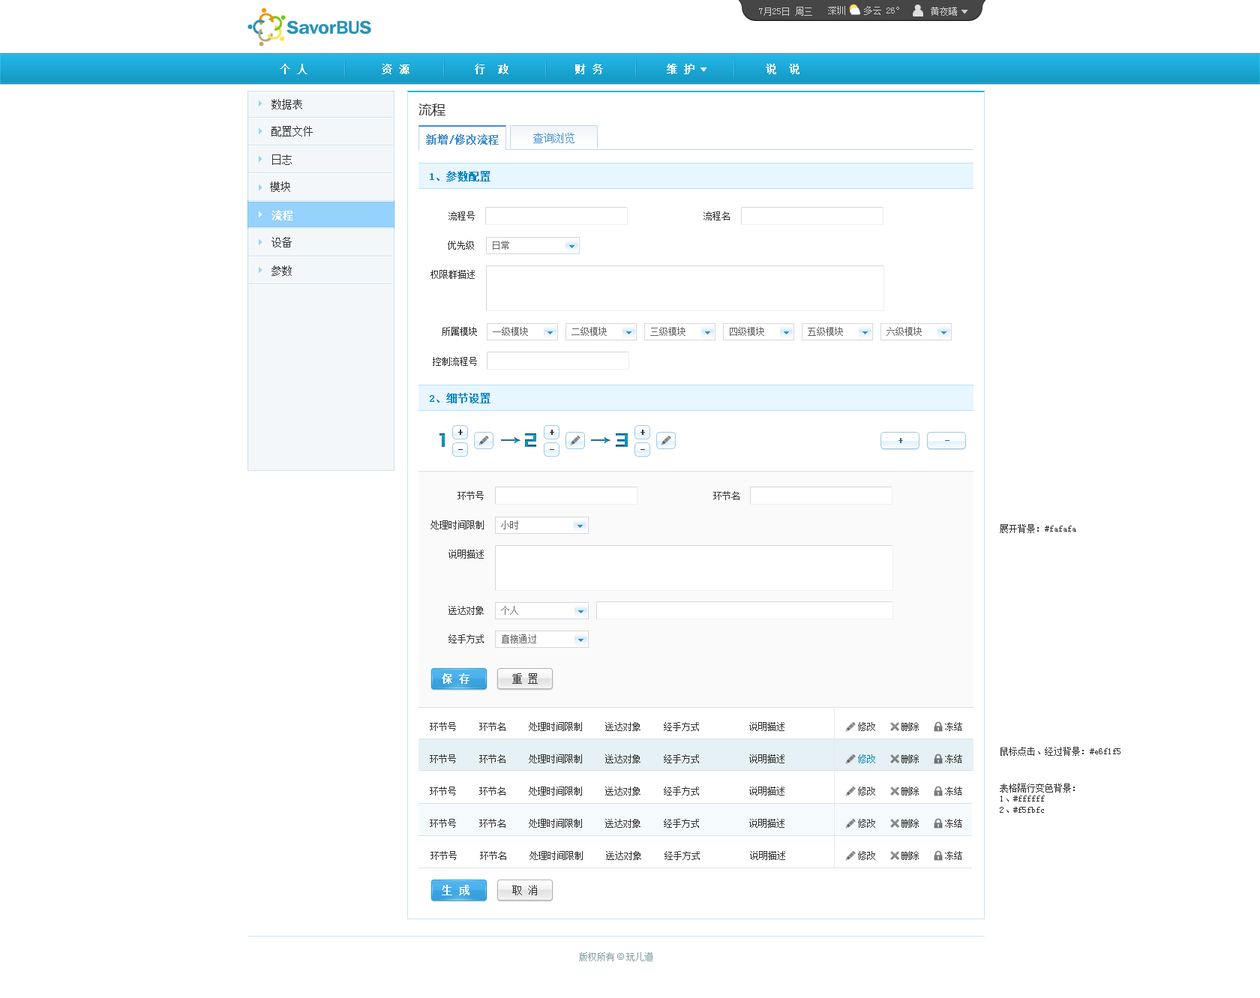
<style>
.page{position:relative;width:1260px;height:998px;background:#ffffff}
.page>*{position:absolute;margin:0}
.t1{font:9px "SimSun";color:#cccccc}
.t2{font:10.5px "SimSun";color:#ffffff;font-weight:bold}
.t3{font:10.5px "SimSun";color:#333333}
.t4{font:13.5px "MicrosoftYaHei";color:#333333}
.t5{font:10.5px "SimSun";color:#458fce;font-weight:bold}
.t6{font:10.5px "SimSun";color:#458fce}
.t7{font:10.5px "SimSun";color:#0085c5;font-weight:bold}
.t8{font:9px "SimSun";color:#333333}
.t9{font:9px "SimSun";color:#666666}
.t10{font:18px "ZHSCNMT--GBK1-0";color:#1091bb;font-weight:bold}
.t11{font:9px "SimSun";color:#333333;font-weight:bold}
.t12{font:18px "ZHSCNMT--GBK1-0";font-weight:bold}
.t13{font:9px "SimSun";color:#406580;font-weight:bold}
.t14{font:9px "SimSun";color:#0085c5}
.t15{font:9px "SimSun";color:#849fa6}
.t16{font:9px "ArialMT";color:#849fa6}
</style>
<div class="page">
<p class="t1" style="left:828px;top:6px;width:71px;height:9px">深圳    多云 26°</p>
<p class="t1" style="left:759px;top:7px;width:53px;height:9px">7月25日 周三</p>
<p class="t1" style="left:931px;top:7px;width:26px;height:9px">黄夜曦</p>
<p class="t2" style="left:280px;top:64px;width:520px;height:10px">个 人         资 源           行  政           财 务       维 护          说  说</p>
<p class="t3" style="left:272px;top:99px;width:30px;height:11px">数据表</p>
<p class="t4" style="left:418px;top:104px;width:28px;height:12px">流程</p>
<p class="t3" style="left:272px;top:126px;width:41px;height:10px">配置文件</p>
<p class="t5" style="left:426px;top:134px;width:73px;height:11px">新增/修改流程</p>
<p class="t6" style="left:533px;top:133px;width:41px;height:10px">查询浏览</p>
<p class="t3" style="left:272px;top:154px;width:20px;height:11px">日志</p>
<p class="t7" style="left:430px;top:171px;width:60px;height:11px">1、参数配置</p>
<p class="t3" style="left:270px;top:182px;width:20px;height:10px">模块</p>
<p class="t2" style="left:272px;top:210px;width:21px;height:10px">流程</p>
<p class="t8" style="left:448px;top:212px;width:27px;height:8px">流程号</p>
<p class="t8" style="left:704px;top:212px;width:26px;height:8px">流程名</p>
<p class="t3" style="left:272px;top:237px;width:20px;height:11px">设备</p>
<p class="t8" style="left:448px;top:241px;width:26px;height:9px">优先级</p>
<p class="t9" style="left:493px;top:241px;width:16px;height:9px">日常</p>
<p class="t3" style="left:272px;top:266px;width:20px;height:10px">参数</p>
<p class="t8" style="left:430px;top:270px;width:45px;height:9px">权限群描述</p>
<p class="t8" style="left:442px;top:327px;width:35px;height:9px">所属模块</p>
<p class="t9" style="left:493px;top:327px;width:35px;height:9px">一级模块</p>
<p class="t9" style="left:572px;top:327px;width:35px;height:9px">二级模块</p>
<p class="t9" style="left:650px;top:327px;width:36px;height:9px">三级模块</p>
<p class="t9" style="left:730px;top:327px;width:34px;height:9px">四级模块</p>
<p class="t9" style="left:808px;top:327px;width:35px;height:9px">五级模块</p>
<p class="t9" style="left:886px;top:327px;width:36px;height:9px">六级模块</p>
<p class="t8" style="left:433px;top:357px;width:44px;height:9px">控制流程号</p>
<p class="t7" style="left:430px;top:393px;width:60px;height:11px">2、细节设置</p>
<p class="t10" style="left:440px;top:434px;width:5px;height:13px">1</p>
<p class="t11" style="left:458px;top:430px;width:5px;height:5px">+</p>
<p class="t12" style="left:525px;top:434px;width:11px;height:13px">2</p>
<p class="t11" style="left:550px;top:430px;width:4px;height:5px">+</p>
<p class="t12" style="left:616px;top:434px;width:12px;height:13px">3</p>
<p class="t11" style="left:640px;top:430px;width:5px;height:5px">+</p>
<p class="t13" style="left:898px;top:438px;width:5px;height:5px">+</p>
<p class="t8" style="left:458px;top:491px;width:26px;height:9px">环节号</p>
<p class="t8" style="left:713px;top:491px;width:27px;height:9px">环节名</p>
<p class="t8" style="left:430px;top:520px;width:54px;height:10px">处理时间限制</p>
<p class="t9" style="left:501px;top:520px;width:17px;height:10px">小时</p>
<p class="t8" style="left:1000px;top:524px;width:76px;height:9px">展开背景：#fafafa</p>
<p class="t8" style="left:448px;top:550px;width:36px;height:9px">说明描述</p>
<p class="t8" style="left:448px;top:606px;width:36px;height:9px">送达对象</p>
<p class="t9" style="left:501px;top:606px;width:17px;height:9px">个人</p>
<p class="t8" style="left:448px;top:634px;width:36px;height:10px">经手方式</p>
<p class="t9" style="left:502px;top:634px;width:34px;height:10px">直接通过</p>
<p class="t2" style="left:442px;top:674px;width:28px;height:10px">保 存</p>
<p class="t3" style="left:512px;top:674px;width:26px;height:10px">重 置</p>
<p class="t8" style="left:430px;top:722px;width:354px;height:9px">环节号     环节名     处理时间限制     送达对象     经手方式           说明描述</p>
<p class="t8" style="left:858px;top:722px;width:17px;height:9px">修改</p>
<p class="t8" style="left:902px;top:722px;width:17px;height:9px">删除</p>
<p class="t8" style="left:945px;top:722px;width:17px;height:9px">冻结</p>
<p class="t8" style="left:1000px;top:747px;width:120px;height:9px">鼠标点击、经过背景：#e6f1f5</p>
<p class="t8" style="left:430px;top:754px;width:354px;height:10px">环节号     环节名     处理时间限制     送达对象     经手方式           说明描述</p>
<p class="t14" style="left:858px;top:754px;width:17px;height:10px">修改</p>
<p class="t8" style="left:902px;top:754px;width:17px;height:10px">删除</p>
<p class="t8" style="left:945px;top:754px;width:17px;height:10px">冻结</p>
<p class="t8" style="left:1000px;top:784px;width:75px;height:29px">表格隔行变色背景：<br>1、#ffffff<br>2、#f5fbfc</p>
<p class="t8" style="left:430px;top:787px;width:354px;height:9px">环节号     环节名     处理时间限制     送达对象     经手方式           说明描述</p>
<p class="t8" style="left:858px;top:787px;width:17px;height:9px">修改</p>
<p class="t8" style="left:902px;top:787px;width:17px;height:9px">删除</p>
<p class="t8" style="left:945px;top:787px;width:17px;height:9px">冻结</p>
<p class="t8" style="left:430px;top:819px;width:354px;height:9px">环节号     环节名     处理时间限制     送达对象     经手方式           说明描述</p>
<p class="t8" style="left:858px;top:819px;width:17px;height:9px">修改</p>
<p class="t8" style="left:902px;top:819px;width:17px;height:9px">删除</p>
<p class="t8" style="left:945px;top:819px;width:17px;height:9px">冻结</p>
<p class="t8" style="left:430px;top:851px;width:355px;height:9px">环节号     环节名     处理时间限制     送达对象     经手方式           说明描述</p>
<p class="t8" style="left:858px;top:851px;width:17px;height:9px">修改</p>
<p class="t8" style="left:902px;top:851px;width:17px;height:9px">删除</p>
<p class="t8" style="left:945px;top:851px;width:17px;height:9px">冻结</p>
<p class="t2" style="left:442px;top:885px;width:28px;height:11px">生 成</p>
<p class="t3" style="left:512px;top:885px;width:25px;height:11px">取 消</p>
<p class="t15" style="left:579px;top:952px;width:73px;height:10px">版权所有<span class="t16"> © </span>玩儿道</p>
</div>
